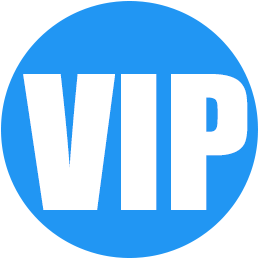
<style>
.page{position:relative;width:260px;height:258px;background:#ffffff}
.page>*{position:absolute;margin:0}
.t1{font:172px "Impact";color:#ffffff}
</style>
<div class="page">
<p class="t1" style="left:23px;top:74px;width:225px;height:136px">VIP</p>
</div>
